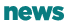
<style>
.page{position:relative;width:67px;height:25px;background:#ffffff}
.page>*{position:absolute;margin:0}
.t1{font:25px "GothamBlack";letter-spacing:-0.05em;color:#087c80}
</style>
<div class="page">
<p class="t1" style="left:4px;top:6px;width:60px;height:15px">news</p>
</div>
